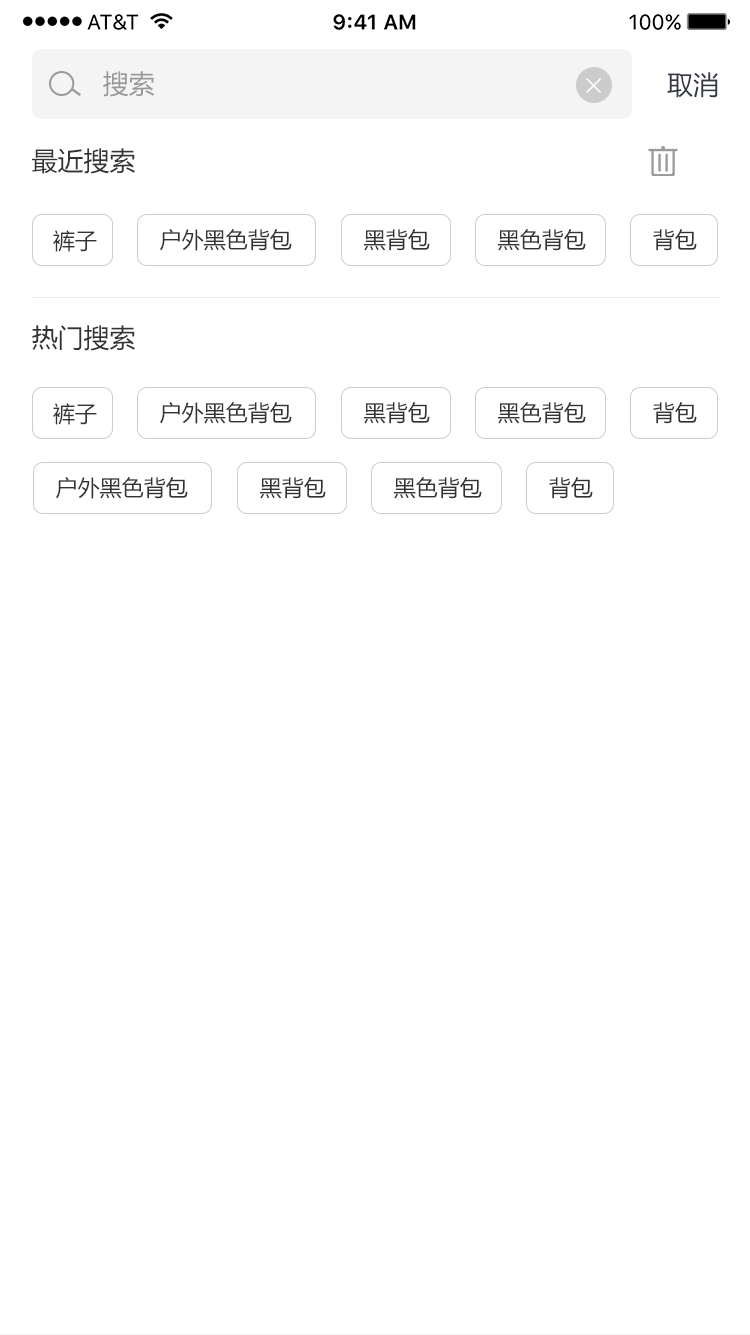
<style>
.page{position:relative;width:750px;height:1335px;background:#ffffff}
.page>*{position:absolute;margin:0}
.t1{font:26px "MicrosoftYaHei";color:#999999}
.t2{font:26px "MicrosoftYaHei";color:#343843}
.t3{font:26px "MicrosoftYaHei";color:#333333}
.t4{font:22px "MicrosoftYaHei";color:#333333}
</style>
<div class="page">
<p class="t1" style="left:103px;top:71px;width:52px;height:26px">搜索</p>
<p class="t2" style="left:667px;top:72px;width:51px;height:26px">取消</p>
<p class="t3" style="left:32px;top:148px;width:103px;height:26px">最近搜索</p>
<p class="t4" style="left:53px;top:230px;width:44px;height:22px">裤子</p>
<p class="t4" style="left:160px;top:229px;width:132px;height:22px">户外黑色背包</p>
<p class="t4" style="left:364px;top:229px;width:66px;height:22px">黑背包</p>
<p class="t4" style="left:498px;top:229px;width:88px;height:22px">黑色背包</p>
<p class="t4" style="left:653px;top:229px;width:44px;height:22px">背包</p>
<p class="t3" style="left:32px;top:325px;width:103px;height:26px">热门搜索</p>
<p class="t4" style="left:53px;top:403px;width:44px;height:22px">裤子</p>
<p class="t4" style="left:160px;top:402px;width:132px;height:22px">户外黑色背包</p>
<p class="t4" style="left:364px;top:402px;width:66px;height:22px">黑背包</p>
<p class="t4" style="left:498px;top:402px;width:88px;height:22px">黑色背包</p>
<p class="t4" style="left:653px;top:402px;width:44px;height:22px">背包</p>
<p class="t4" style="left:56px;top:477px;width:132px;height:22px">户外黑色背包</p>
<p class="t4" style="left:260px;top:477px;width:66px;height:22px">黑背包</p>
<p class="t4" style="left:394px;top:477px;width:88px;height:22px">黑色背包</p>
<p class="t4" style="left:549px;top:477px;width:44px;height:22px">背包</p>
</div>
